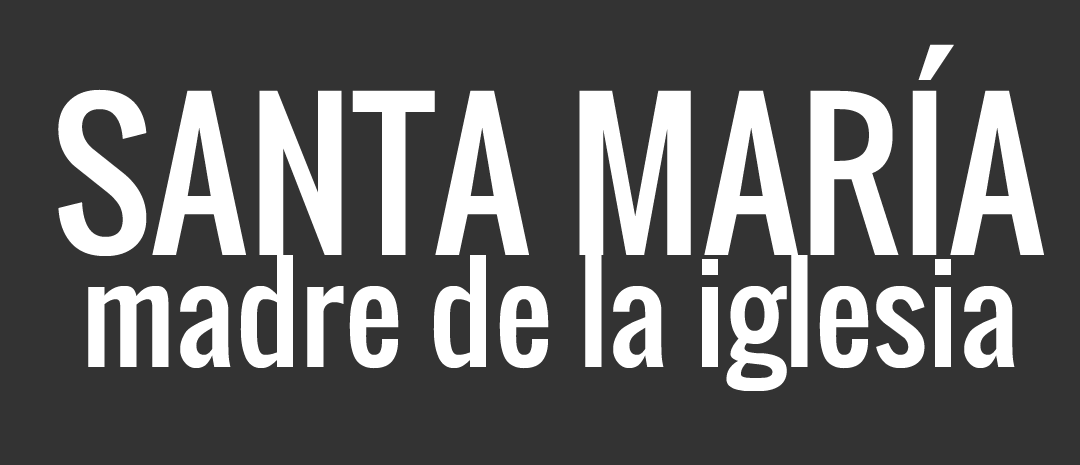
<style>
.page{position:relative;width:1080px;height:465px;background:#333333}
.page>*{position:absolute;margin:0}
.t1{font:186.7px "Oswald-Regular";color:#ffffff}
.t2{font:128px "Oswald-Regular";color:#ffffff}
</style>
<div class="page">
<p class="t1" style="left:58px;top:44px;width:986px;height:212px">SANTA MARÍA</p>
<p class="t2" style="left:88px;top:255px;width:927px;height:136px">madre de la iglesia</p>
</div>
